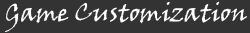
<style>
.page{position:relative;width:250px;height:33px;background:#333333}
.page>*{position:absolute;margin:0}
.t1{font:25px "VinerHandITC";color:#ffffff}
</style>
<div class="page">
<p class="t1" style="left:5px;top:1px;width:242px;height:31px">Game Customization</p>
</div>
